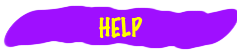
<style>
.page{position:relative;width:240px;height:52px;background:#9f0fff}
.page>*{position:absolute;margin:0}
.t1{font:24px "MarkerFelt-Thin";color:#ffff00}
</style>
<div class="page">
<p class="t1" style="left:99px;top:17px;width:44px;height:21px">HELP</p>
</div>
